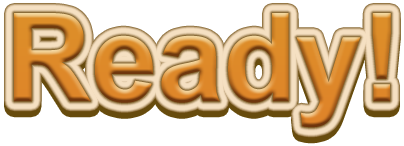
<style>
.page{position:relative;width:404px;height:146px;background:#ffffff}
.page>*{position:absolute;margin:0}
.t1{font:122.6px "Arial-BoldMT";scale:0.97 1}
</style>
<div class="page">
<p class="t1" style="left:14px;top:13px;width:377px;height:115px">Ready!</p>
<p class="t1" style="left:14px;top:19px;width:377px;height:115px">Ready!</p>
</div>
